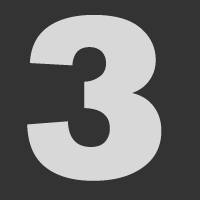
<style>
.page{position:relative;width:200px;height:200px;background:#333333}
.page>*{position:absolute;margin:0}
.t1{font:236.9px "Rockwell-ExtraBold";color:#d8d8d8}
</style>
<div class="page">
<p class="t1" style="left:27px;top:15px;width:135px;height:166px">3</p>
</div>
